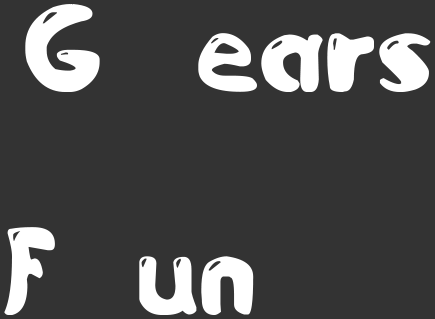
<style>
.page{position:relative;width:435px;height:319px;background:#333333}
.page>*{position:absolute;margin:0}
.t1{font:120px "Jetmix";color:#ffffff}
</style>
<div class="page">
<p class="t1" style="left:25px;top:4px;width:75px;height:88px">G</p>
<p class="t1" style="left:198px;top:33px;width:233px;height:59px">ears</p>
<p class="t1" style="left:4px;top:227px;width:51px;height:88px">F</p>
<p class="t1" style="left:139px;top:256px;width:115px;height:59px">un</p>
</div>
